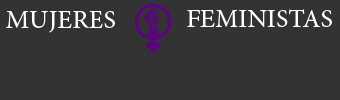
<style>
.page{position:relative;width:340px;height:100px;background:#333333}
.page>*{position:absolute;margin:0}
.t1{font:26.2px "MinionPro-Regular";color:#ffffff}
</style>
<div class="page">
<p class="t1" style="left:6px;top:11px;width:109px;height:22px">MUJERES</p>
<p class="t1" style="left:187px;top:9px;width:145px;height:18px">FEMINISTAS</p>
</div>
